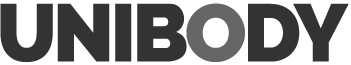
<style>
.page{position:relative;width:351px;height:65px;background:#333333}
.page>*{position:absolute;margin:0}
.t1{font:81px "Raleway-Black";letter-spacing:-0.045em;color:#333333;text-transform:uppercase}
.t2{font:81px "Raleway-Black";letter-spacing:-0.045em;color:#666666;text-transform:uppercase}
</style>
<div class="page">
<p class="t1" style="left:0px;top:3px;width:349px;height:59px">unib<span class="t2">o</span>dy</p>
</div>
